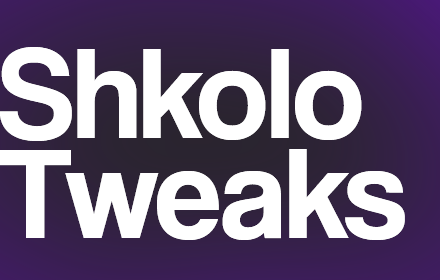
<style>
.page{position:relative;width:440px;height:280px;background:#ffffff}
.page>*{position:absolute;margin:0}
.t1{font:132px/100px "CoolveticaRg-Regular";color:#ffffff}
</style>
<div class="page">
<p class="t1" style="left:0px;top:47px;width:405px;height:193px">Shkolo<br>Tweaks</p>
</div>
